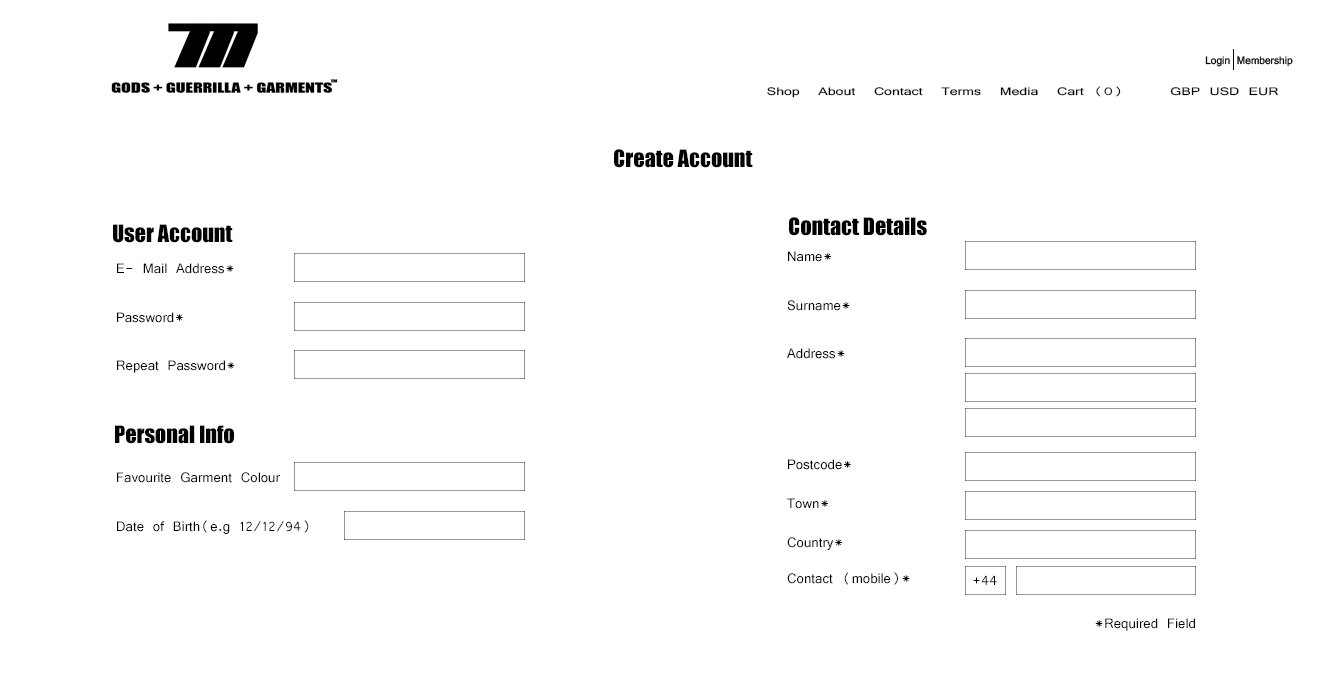
<style>
.page{position:relative;width:1332px;height:683px;background:#ffffff}
.page>*{position:absolute;margin:0}
.t1{font:11.7px "Vrinda";color:#000000;scale:1.35 1}
.t2{font:22.2px "Impact";color:#020202}
.t3{font:14.8px "Vrinda";color:#020202}
</style>
<div class="page">
<p class="t1" style="left:767px;top:86px;width:511px;height:12px">Shop  About  Contact  Terms  Media  Cart (0)     GBP USD EUR</p>
<p class="t2" style="left:614px;top:149px;width:139px;height:19px">Create Account</p>
<p class="t2" style="left:789px;top:217px;width:138px;height:19px">Contact Details</p>
<p class="t2" style="left:113px;top:224px;width:120px;height:19px">User Account</p>
<p class="t3" style="left:788px;top:251px;width:43px;height:11px">Name*</p>
<p class="t3" style="left:117px;top:263px;width:117px;height:11px">E- Mail Address*</p>
<p class="t3" style="left:787px;top:300px;width:63px;height:11px">Surname*</p>
<p class="t3" style="left:117px;top:312px;width:66px;height:11px">Password*</p>
<p class="t3" style="left:787px;top:348px;width:58px;height:11px">Address*</p>
<p class="t3" style="left:117px;top:360px;width:118px;height:13px">Repeat Password*</p>
<p class="t2" style="left:115px;top:425px;width:119px;height:19px">Personal Info</p>
<p class="t3" style="left:788px;top:459px;width:63px;height:11px">Postcode*</p>
<p class="t3" style="left:117px;top:472px;width:163px;height:11px">Favourite Garment Colour</p>
<p class="t3" style="left:787px;top:498px;width:41px;height:11px">Town*</p>
<p class="t3" style="left:117px;top:520px;width:192px;height:14px">Date of Birth(e.g 12/12/94)</p>
<p class="t3" style="left:787px;top:537px;width:55px;height:13px">Country*</p>
<p class="t3" style="left:787px;top:572px;width:123px;height:13px">Contact (mobile)*</p>
<p class="t3" style="left:973px;top:575px;width:24px;height:10px">+44</p>
<p class="t3" style="left:1095px;top:618px;width:100px;height:13px">*Required Field</p>
</div>
